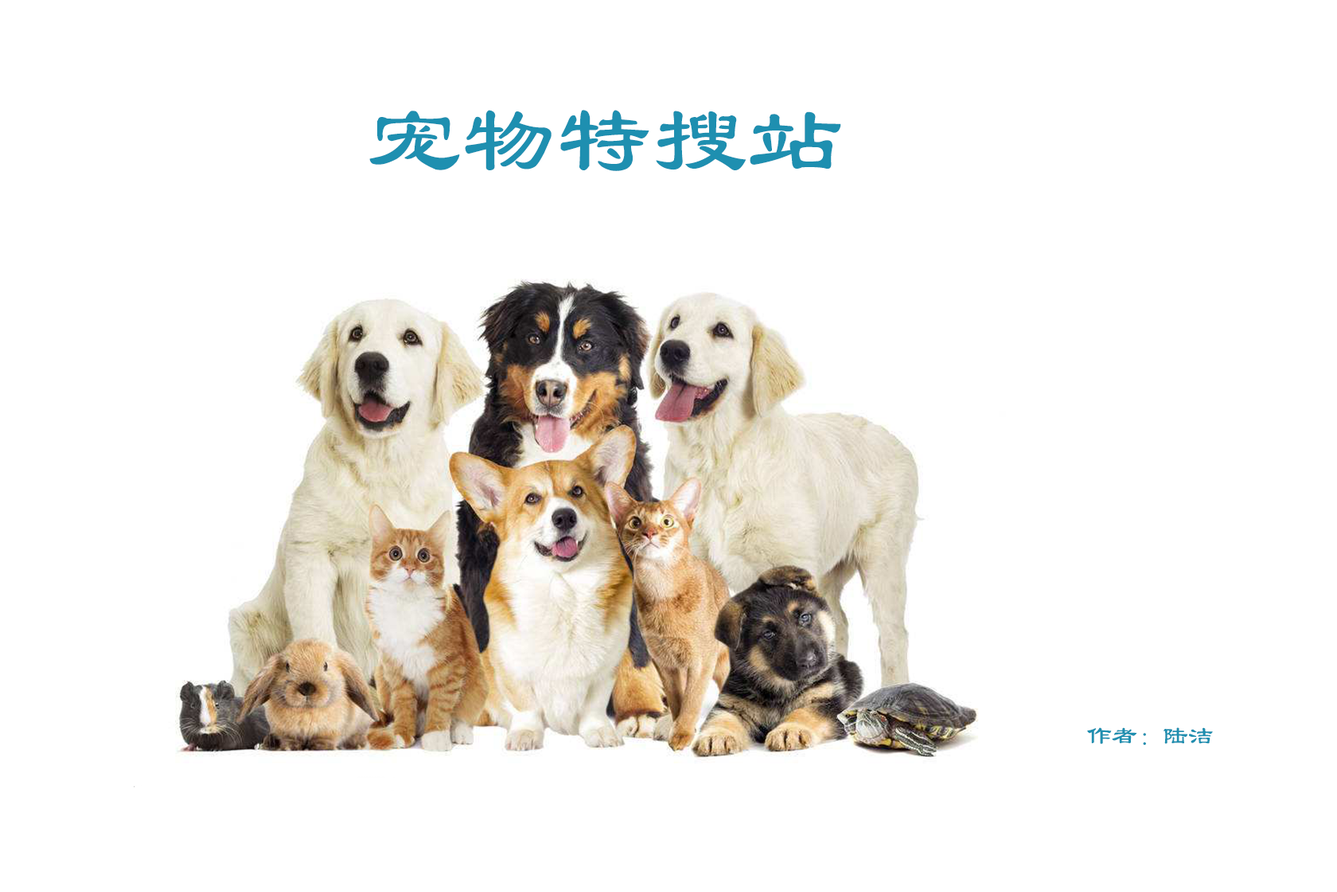
<style>
.page{position:relative;width:1337px;height:892px;background:#ffffff}
.page>*{position:absolute;margin:0}
.t1{font:95.5px "LiSu";color:#1e8fb0}
.t2{font:25.5px "LiSu";color:#1e8fb0}
</style>
<div class="page">
<p class="t1" style="left:369px;top:110px;width:472px;height:61px">宠物特搜站</p>
<p class="t2" style="left:1087px;top:727px;width:126px;height:19px">作者：陆洁</p>
</div>
